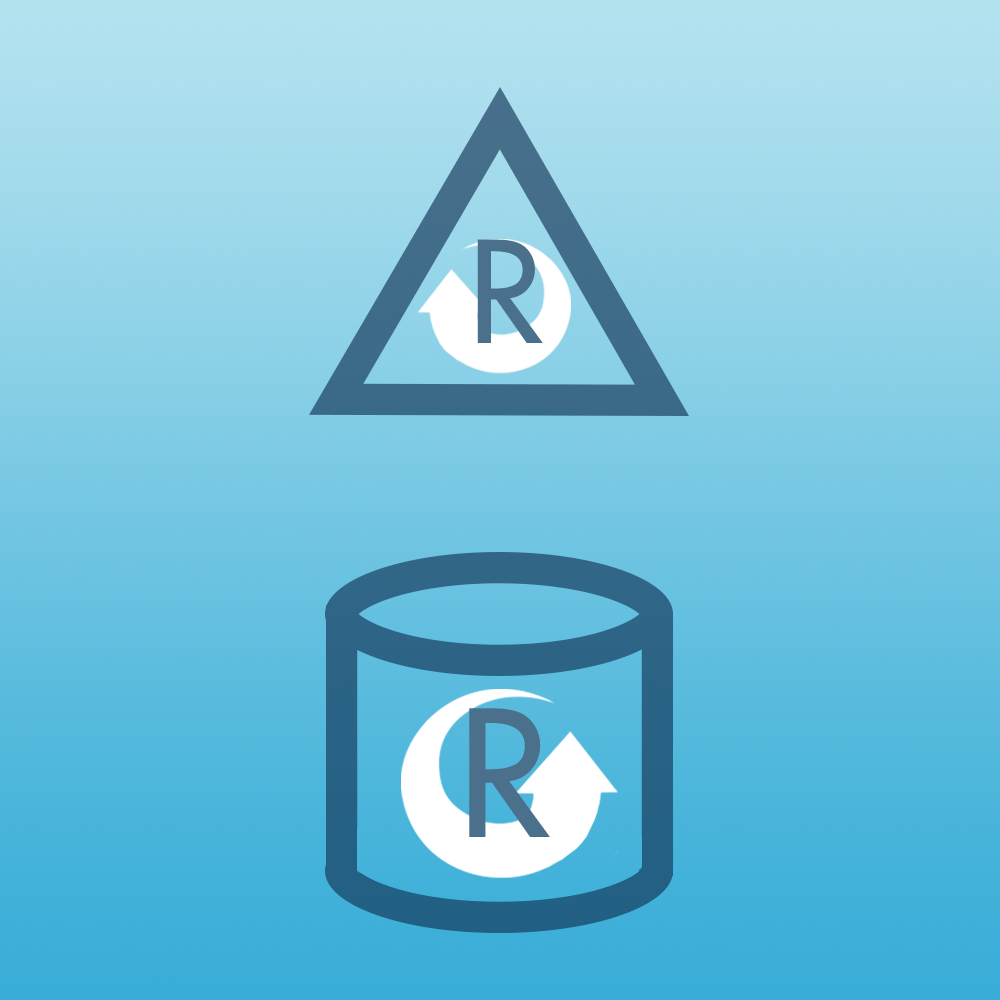
<style>
.page{position:relative;width:1000px;height:1000px}
.page>*{position:absolute;margin:0}
.t1{font:137.1px "FuturaLT";color:#4a708b}
.t2{font:170.4px "FuturaLT";color:#4a708b}
</style>
<div class="page">
<p class="t1" style="left:477px;top:239px;width:66px;height:104px">R</p>
<p class="t2" style="left:469px;top:708px;width:81px;height:129px">R</p>
</div>
